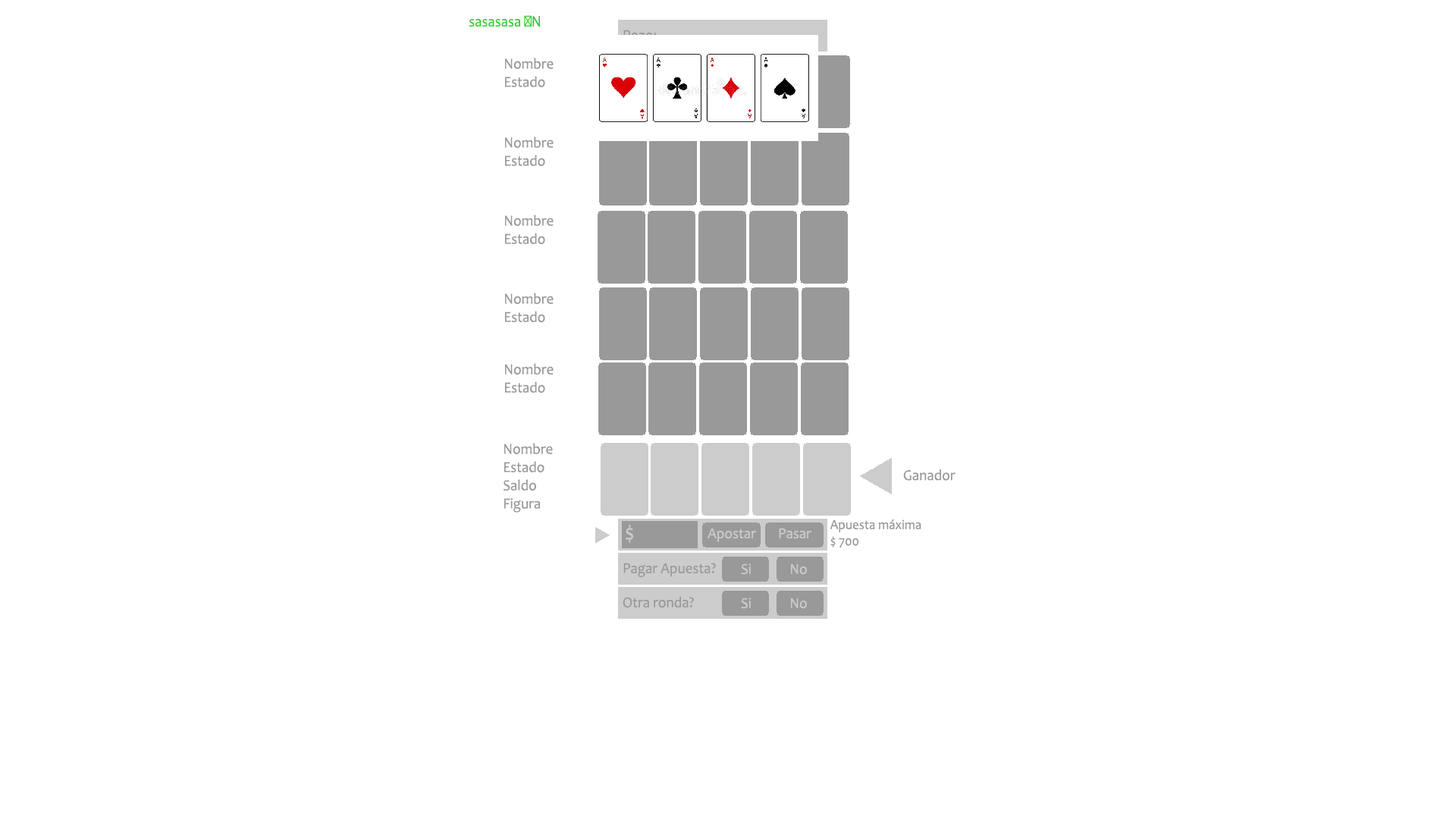
<style>
.page{position:relative;width:1456px;height:819px;background:#ffffff}
.page>*{position:absolute;margin:0}
.t1{font:15.2px "Candara";color:#33cc33;scale:0.95 1}
.t2{font:15.2px "MyriadPro-Regular";color:#33cc33;scale:0.95 1}
.t3{font:15.2px "Candara";color:#999999;scale:0.95 1}
.t4{font:13.6px "Candara";color:#999999;scale:0.95 1}
.t5{font:15.2px "Candara";color:#cccccc;scale:0.95 1}
</style>
<div class="page">
<p class="t1" style="left:469px;top:15px;width:71px;height:12px">sasasasa <span class="t2">♣N</span></p>
<p class="t3" style="left:504px;top:58px;width:50px;height:29px">Nombre<br>Estado</p>
<p class="t3" style="left:504px;top:136px;width:50px;height:30px">Nombre<br>Estado</p>
<p class="t3" style="left:504px;top:215px;width:50px;height:29px">Nombre<br>Estado</p>
<p class="t3" style="left:504px;top:293px;width:50px;height:29px">Nombre<br>Estado</p>
<p class="t3" style="left:504px;top:363px;width:50px;height:30px">Nombre<br>Estado</p>
<p class="t3" style="left:504px;top:443px;width:49px;height:70px">Nombre<br>Estado<br>Saldo<br>Figura</p>
<p class="t3" style="left:903px;top:469px;width:52px;height:12px">Ganador</p>
<p class="t4" style="left:830px;top:519px;width:91px;height:29px">Apuesta máxima<br>$ 700</p>
<p class="t5" style="left:708px;top:529px;width:48px;height:13px">Apostar</p>
<p class="t5" style="left:779px;top:528px;width:32px;height:10px">Pasar</p>
<p class="t3" style="left:623px;top:563px;width:93px;height:14px">Pagar Apuesta?</p>
<p class="t5" style="left:790px;top:564px;width:17px;height:11px">No</p>
<p class="t3" style="left:623px;top:596px;width:71px;height:12px">Otra ronda?</p>
<p class="t5" style="left:790px;top:598px;width:17px;height:11px">No</p>
</div>
